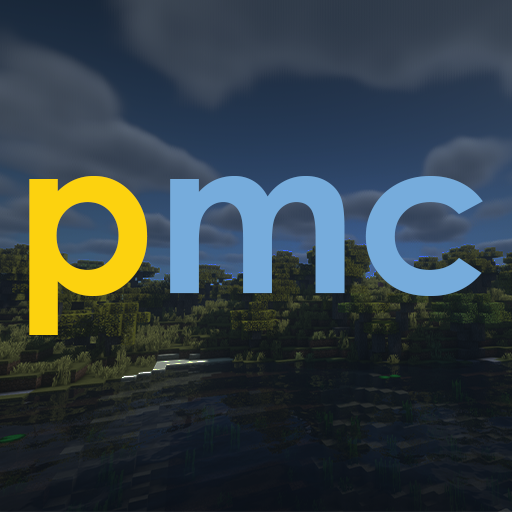
<style>
.page{position:relative;width:512px;height:512px}
.page>*{position:absolute;margin:0}
.t1{font:213.6px "CenturyGothic-Bold";color:#76acdc}
.t2{font:213.6px "CenturyGothic-Bold";color:#fcd20f}
</style>
<div class="page">
<p class="t1" style="left:29px;top:176px;width:454px;height:159px"><span class="t2">p</span>mc</p>
</div>
